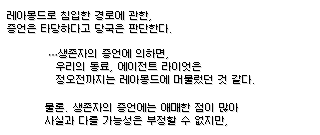
<style>
.page{position:relative;width:320px;height:135px;background:#ffffff}
.page>*{position:absolute;margin:0}
.t1{font:10px/13px "Galmuri9-Regular";color:#000000}
.t2{font:10px/13px "DejaVuSans";color:#000000}
</style>
<div class="page">
<p class="t1" style="left:7px;top:11px;width:165px;height:22px">레아몽드로 침입한 경로에 관한,<br>증언은 타당하다고 당국은 판단한다.</p>
<p class="t1" style="left:49px;top:49px;width:206px;height:35px"><span class="t2">⋯</span>생존자의 증언에 의하면, <br>  우리의 동료, 에이전트 라이엇은 <br>  정오전까지는 레아몽드에 머물렀던 것 같다.</p>
<p class="t1" style="left:45px;top:103px;width:194px;height:23px">물론. 생존자의 증언에는 애매한 점이 많아 <br>사실과 다를 가능성은 부정할 수 없지만,</p>
</div>
